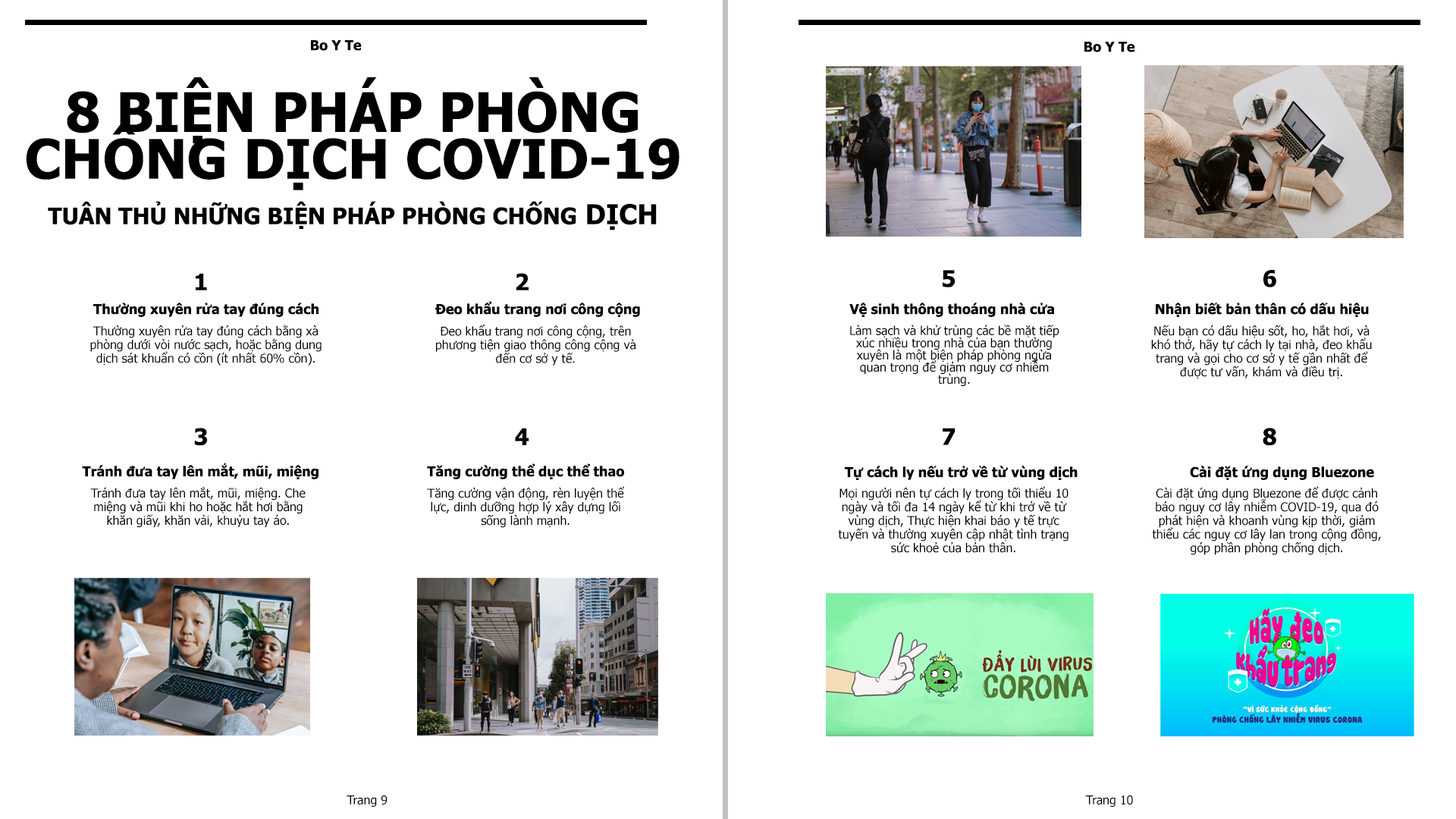
<style>
.page{position:relative;width:1456px;height:819px;background:#ffffff}
.page>*{position:absolute;margin:0}
.t1{font:13.6px "Tahoma-Bold";color:#000000}
.t2{font:54.6px/46.8px "Tahoma-Bold";color:#000000}
.t3{font:22.7px "Tahoma-Bold";color:#000000}
.t4{font:27.3px "Tahoma-Bold";color:#000000}
.t5{font:12.1px/13.6px "Tahoma";color:#000000}
.t6{font:12.2px/12.2px "Tahoma";color:#000000}
.t7{font:12.1px "Tahoma";color:#000000}
</style>
<div class="page">
<p class="t1" style="left:311px;top:40px;width:51px;height:11px">Bo Y Te</p>
<p class="t1" style="left:1084px;top:42px;width:51px;height:10px">Bo Y Te</p>
<p class="t2" style="left:26px;top:77px;width:653px;height:113px;text-align:center">8 BIỆN PHÁP PHÒNG CHỐNG DỊCH COVID-19</p>
<p class="t3" style="left:48px;top:201px;width:609px;height:30px">TUÂN THỦ NHỮNG BIỆN PHÁP PHÒNG CHỐNG<span class="t4"> DỊCH</span></p>
<p class="t3" style="left:943px;top:270px;width:333px;height:17px">5                                              6</p>
<p class="t3" style="left:196px;top:273px;width:333px;height:17px">1                                              2</p>
<p class="t1" style="left:93px;top:301px;width:547px;height:16px">Thường xuyên rửa tay đúng cách                             Đeo khẩu trang nơi công cộng</p>
<p class="t1" style="left:849px;top:303px;width:520px;height:14px">Vệ sinh thông thoáng nhà cửa                         Nhận biết bản thân có dấu hiệu</p>
<p class="t5" style="left:90px;top:325px;width:232px;height:41px;text-align:center">Thường xuyên rửa tay đúng cách bằng xà phòng dưới vòi nước sạch, hoặc bằng dung dịch sát khuẩn có cồn (ít nhất 60% cồn).</p>
<p class="t5" style="left:436px;top:324px;width:199px;height:42px;text-align:center">Đeo khẩu trang nơi công cộng, trên phương tiện giao thông công cộng và đến cơ sở y tế.</p>
<p class="t6" style="left:850px;top:325px;width:209px;height:62px;text-align:center">Làm sạch và khử trùng các bề mặt tiếp xúc nhiều trong nhà của bạn thường xuyên là một biện pháp phòng ngừa quan trọng để giảm nguy cơ nhiễm trùng.</p>
<p class="t5" style="left:1151px;top:325px;width:221px;height:54px;text-align:center">Nếu bạn có dấu hiệu sốt, ho, hắt hơi, và khó thở, hãy tự cách ly tại nhà, đeo khẩu trang và gọi cho cơ sở y tế gần nhất để được tư vấn, khám và điều trị.</p>
<p class="t3" style="left:194px;top:428px;width:335px;height:18px">3                                              4</p>
<p class="t3" style="left:943px;top:428px;width:333px;height:18px">7                                              8</p>
<p class="t1" style="left:82px;top:463px;width:542px;height:16px">Tránh đưa tay lên mắt, mũi, miệng                           Tăng cường thể dục thể thao</p>
<p class="t1" style="left:844px;top:466px;width:530px;height:14px">Tự cách ly nếu trở về từ vùng dịch                            Cài đặt ứng dụng Bluezone</p>
<p class="t5" style="left:90px;top:487px;width:216px;height:41px;text-align:center">Tránh đưa tay lên mắt, mũi, miệng. Che miệng và mũi khi ho hoặc hắt hơi bằng khăn giấy, khăn vải, khuỷu tay áo.</p>
<p class="t5" style="left:427px;top:486px;width:197px;height:42px;text-align:center">Tăng cường vận động, rèn luyện thể lực, dinh dưỡng hợp lý xây dựng lối sống lành mạnh.</p>
<p class="t5" style="left:838px;top:486px;width:230px;height:67px;text-align:center">Mọi người nên tự cách ly trong tối thiểu 10 ngày và tối đa 14 ngày kể từ khi trở về từ vùng dịch, Thực hiện khai báo y tế trực tuyến và thường xuyên cập nhật tình trạng sức khoẻ của bản thân.</p>
<p class="t5" style="left:1152px;top:486px;width:229px;height:69px;text-align:center">Cài đặt ứng dụng Bluezone để được cảnh báo nguy cơ lây nhiễm COVID-19, qua đó phát hiện và khoanh vùng kịp thời, giảm thiểu các nguy cơ lây lan trong cộng đồng, góp phần phòng chống dịch.</p>
<p class="t7" style="left:347px;top:795px;width:41px;height:12px">Trang 9</p>
<p class="t7" style="left:1085px;top:795px;width:48px;height:12px">Trang 10</p>
</div>
